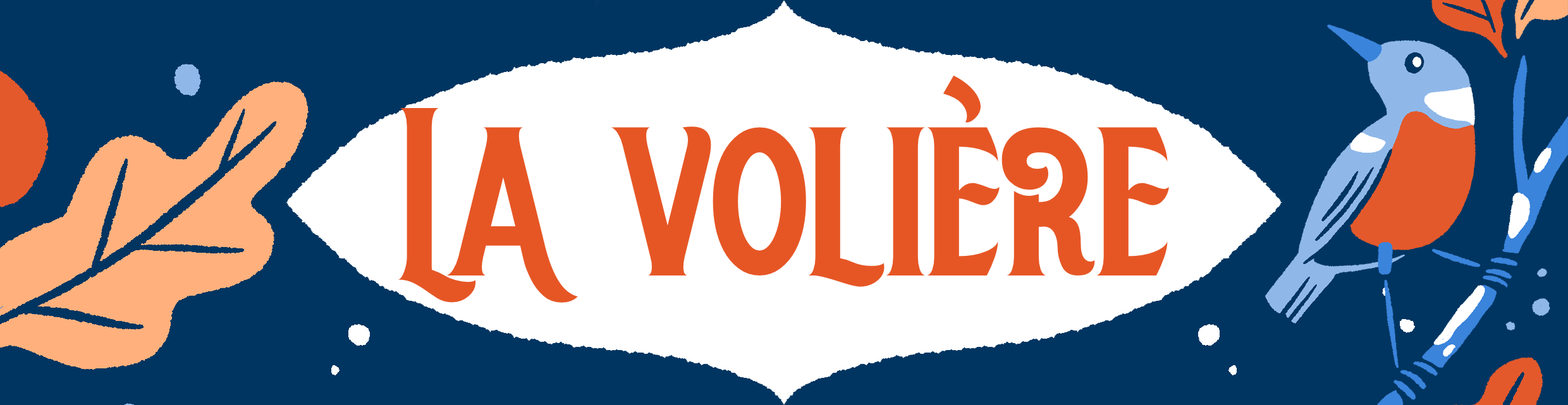
<style>
.page{position:relative;width:1568px;height:405px;background:#003561}
.page>*{position:absolute;margin:0}
.t1{font:257.8px "Robusta-Regular";color:#e65525}
</style>
<div class="page">
<p class="t1" style="left:398px;top:75px;width:771px;height:228px">La volière</p>
</div>
